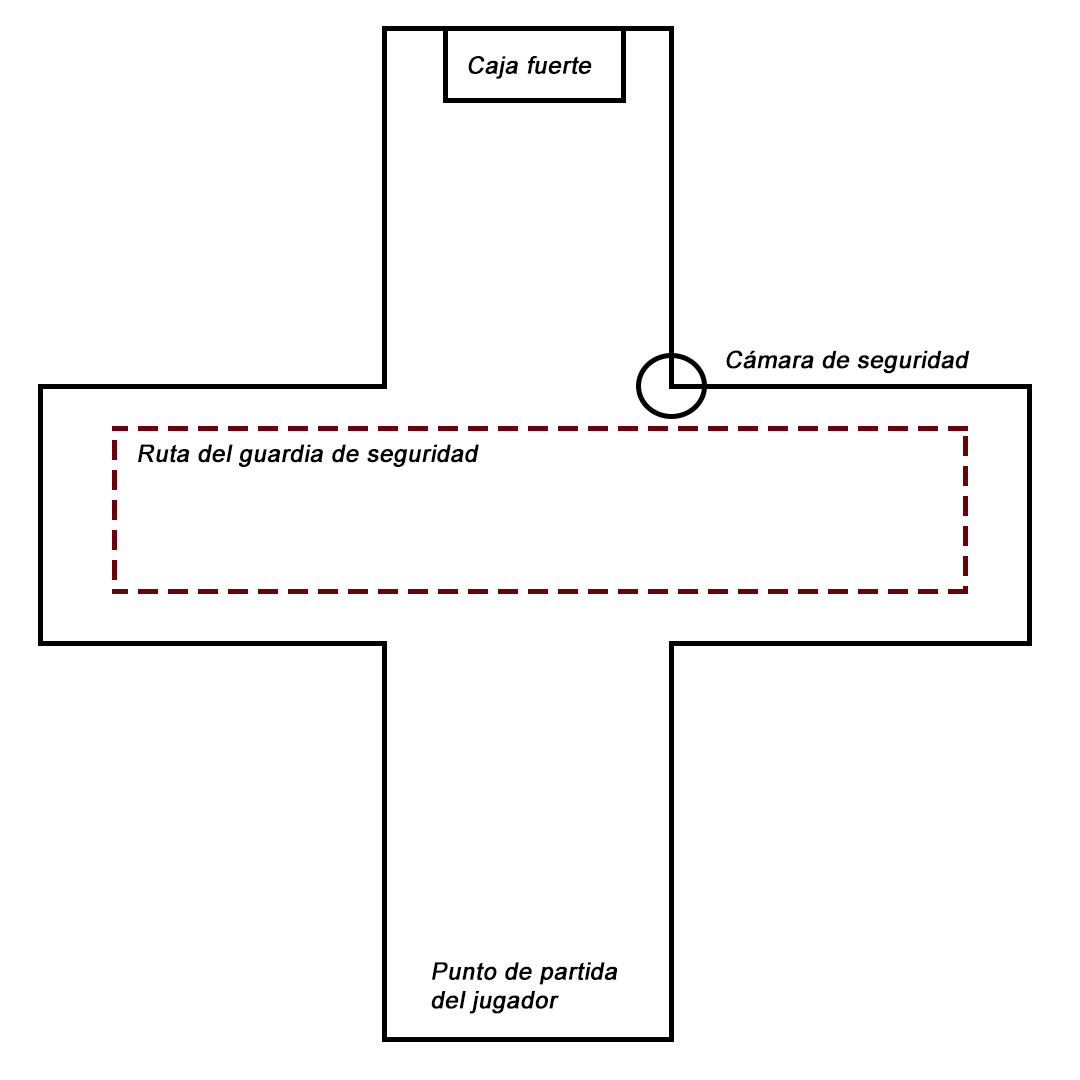
<style>
.page{position:relative;width:1080px;height:1080px;background:#ffffff}
.page>*{position:absolute;margin:0}
.t1{font:24px "ArialMT";color:#000000;font-weight:bold;font-style:italic}
</style>
<div class="page">
<p class="t1" style="left:468px;top:56px;width:124px;height:23px">Caja fuerte</p>
<p class="t1" style="left:726px;top:350px;width:244px;height:24px">Cámara de seguridad</p>
<p class="t1" style="left:138px;top:444px;width:341px;height:23px">Ruta del guardia de seguridad</p>
<p class="t1" style="left:431px;top:962px;width:187px;height:52px">Punto de partida del jugador</p>
</div>
